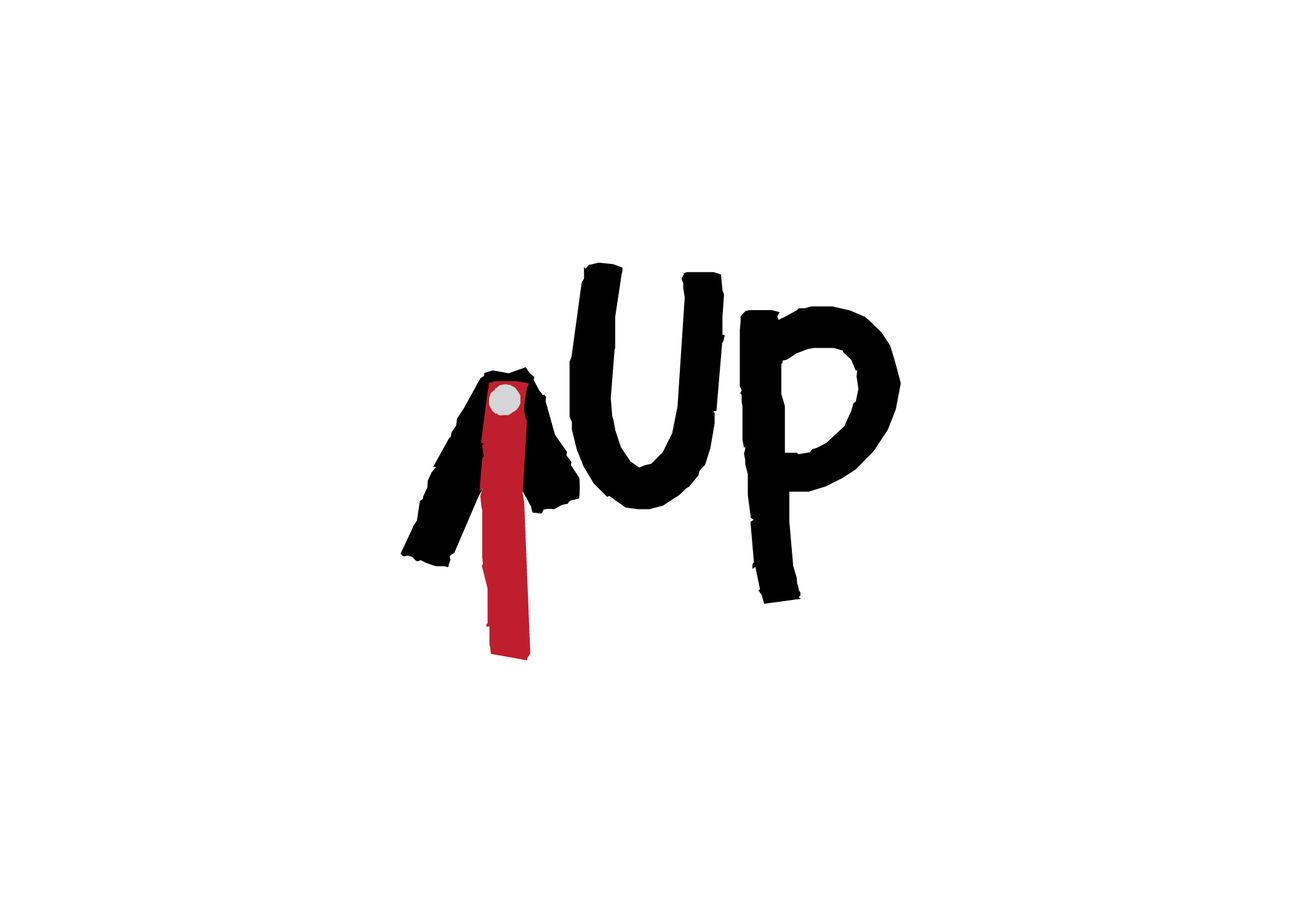
<style>
.page{position:relative;width:1292px;height:923px;background:#ffffff}
.page>*{position:absolute;margin:0}
.t1{font:380px "DKCoverUp-Regular";color:#000000}
.t2{font:353.9px "DKCoverUp-Regular";scale:1.4 1}
.t3{font:380px "DKCoverUp-Regular";color:#bf1e2d}
.t4{font:253.4px "DKCoverUp-Regular";color:#d5d6d7}
</style>
<div class="page">
<p class="t1" style="left:569px;top:263px;width:332px;height:341px">Up</p>
<p class="t2" style="left:390px;top:367px;width:219px;height:245px;rotate:180deg">V</p>
<p class="t3" style="left:479px;top:381px;width:51px;height:279px">l</p>
<p class="t4" style="left:489px;top:384px;width:32px;height:32px">.</p>
</div>
